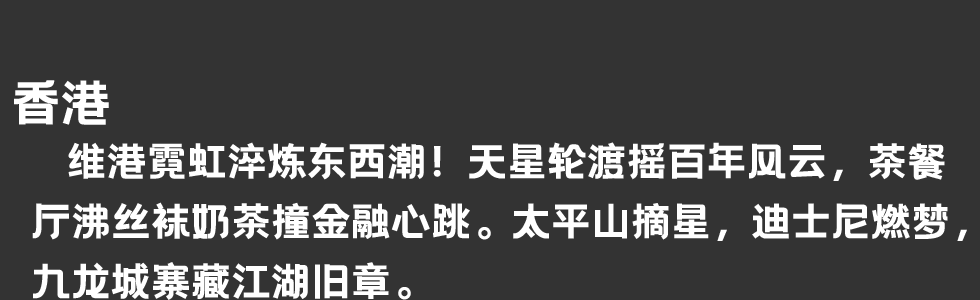
<style>
.page{position:relative;width:980px;height:300px;background:#333333}
.page>*{position:absolute;margin:0}
.t1{font:50px "HelloFont-WenYiHei";color:#ffffff}
.t2{font:40px/60px "HelloFont-WenYiHei";color:#ffffff}
</style>
<div class="page">
<p class="t1" style="left:14px;top:80px;width:95px;height:45px">香港</p>
<p class="t2" style="left:32px;top:142px;width:935px;height:158px">维港霓虹淬炼东西潮！天星轮渡摇百年风云，茶餐<br>厅沸丝袜奶茶撞金融心跳。太平山摘星，迪士尼燃梦，<br>九龙城寨藏江湖旧章。</p>
</div>
